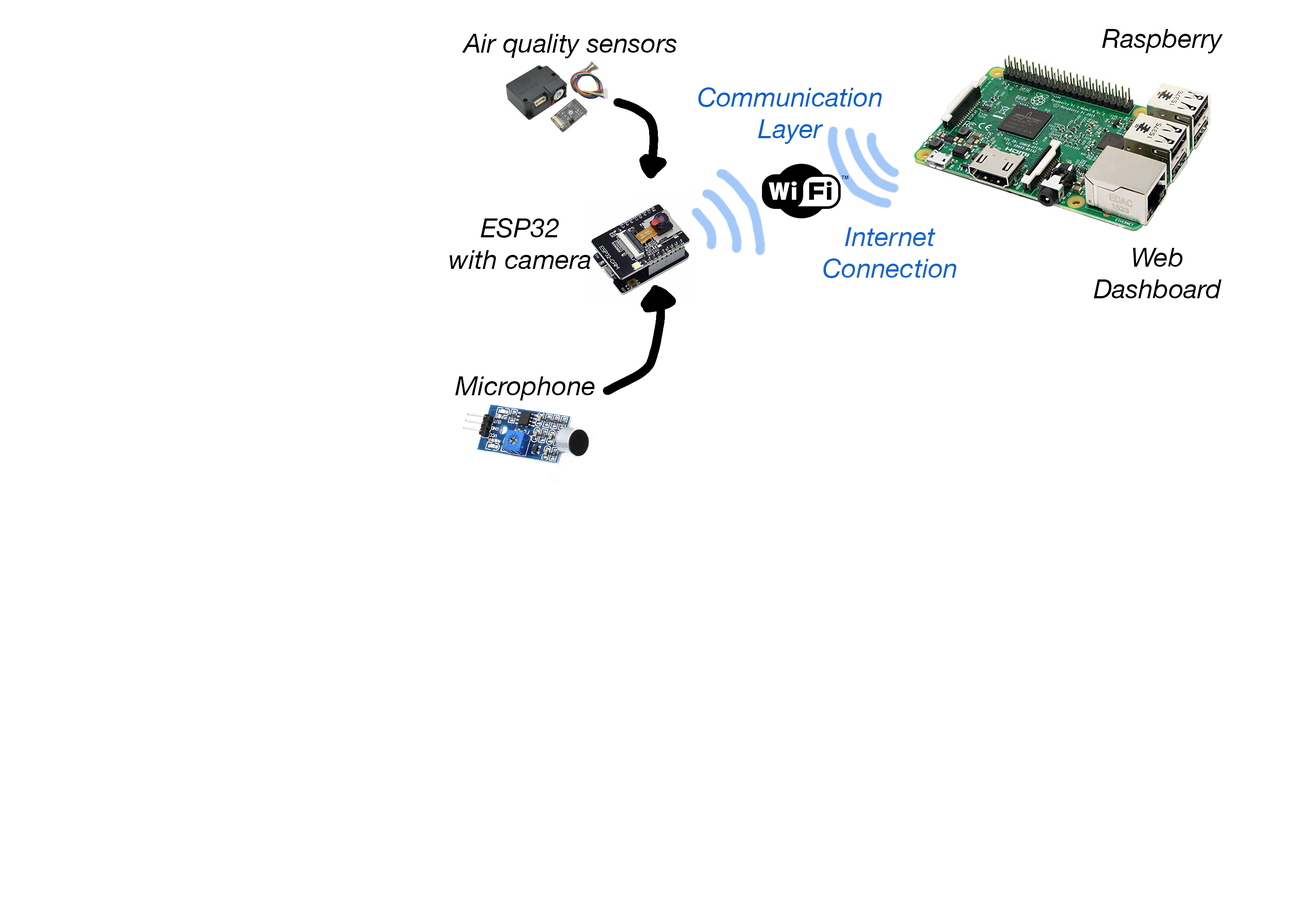
<style>
.page{position:relative;width:1292px;height:923px;background:#ffffff}
.page>*{position:absolute;margin:0}
.t1{font:26.3px "HelveticaNeue-Italic";color:#000000}
.t2{font:26.3px "HelveticaNeue-Italic";color:#0c60cd}
.t3{font:26.3px "HelveticaNeue-Italic";color:#1564ce}
</style>
<div class="page">
<p class="t1" style="left:1102px;top:29px;width:121px;height:25px">Raspberry</p>
<p class="t1" style="left:462px;top:34px;width:215px;height:24px">Air quality sensors</p>
<p class="t2" style="left:698px;top:87px;width:183px;height:57px;text-align:center">Communication<br>Layer</p>
<p class="t1" style="left:449px;top:218px;width:141px;height:51px;text-align:center">ESP32<br>with camera</p>
<p class="t3" style="left:823px;top:227px;width:133px;height:51px;text-align:center">Internet<br>Connection</p>
<p class="t1" style="left:1093px;top:248px;width:129px;height:50px;text-align:center">Web<br>Dashboard</p>
<p class="t1" style="left:455px;top:376px;width:140px;height:25px">Microphone</p>
</div>
